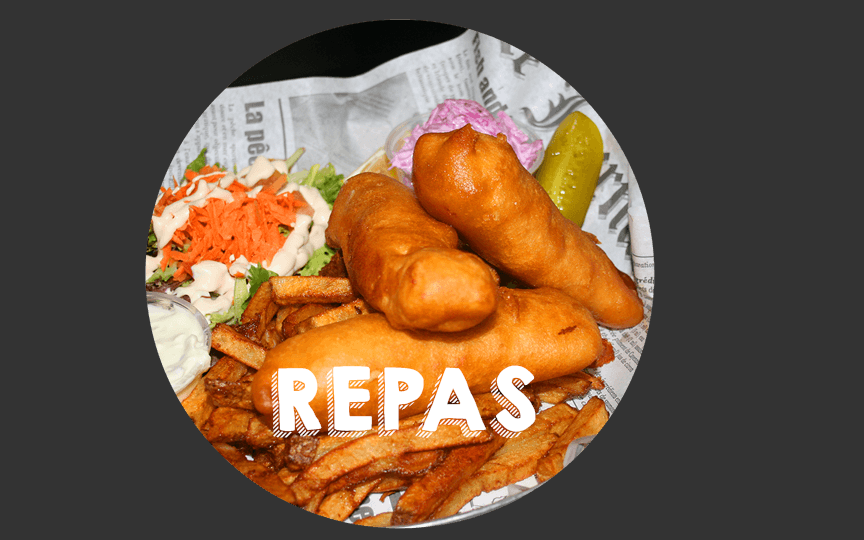
<style>
.page{position:relative;width:864px;height:540px;background:#333333}
.page>*{position:absolute;margin:0}
.t1{font:77px "KGHAPPY";color:#ffffff;text-transform:uppercase}
</style>
<div class="page">
<p class="t1" style="left:271px;top:365px;width:265px;height:74px">Repas</p>
</div>
